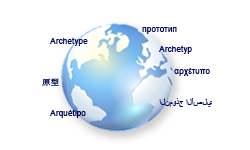
<style>
.page{position:relative;width:250px;height:150px;background:#ffffff}
.page>*{position:absolute;margin:0}
.t1{font:8px "ArialMT";color:#000757;scale:1.04 1}
.t2{font:8px "MS-Mincho";color:#000757;scale:1.04 1}
</style>
<div class="page">
<p class="t1" style="left:142px;top:27px;width:35px;height:7px">прототип</p>
<p class="t1" style="left:50px;top:37px;width:38px;height:9px">Archetype</p>
<p class="t1" style="left:159px;top:45px;width:33px;height:9px">Archetyp</p>
<p class="t2" style="left:42px;top:78px;width:17px;height:8px">原型</p>
<p class="t1" style="left:174px;top:68px;width:36px;height:8px">αρχέτυπο</p>
<p class="t1" style="left:159px;top:98px;width:53px;height:9px">النموذج الأصلي</p>
<p class="t1" style="left:50px;top:109px;width:36px;height:9px">Arquétipo</p>
</div>
